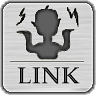
<style>
.page{position:relative;width:96px;height:96px}
.page>*{position:absolute;margin:0}
.t1{font:24px "BookAntiqua-Bold";color:#000000}
</style>
<div class="page">
<p class="t1" style="left:17px;top:67px;width:63px;height:17px">LINK</p>
</div>
